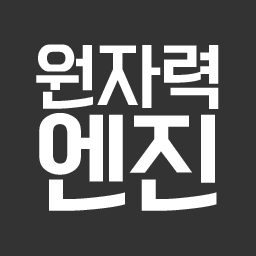
<style>
.page{position:relative;width:256px;height:256px;background:#333333}
.page>*{position:absolute;margin:0}
.t1{font:66.6px/70px "KoreanYNSJG4-R";color:#ffffff}
.t2{font:100px/70px "KoreanYNSJG4-R";color:#ffffff}
</style>
<div class="page">
<p class="t1" style="left:36px;top:44px;width:183px;height:167px">원자력<br><span class="t2">엔진</span></p>
</div>
